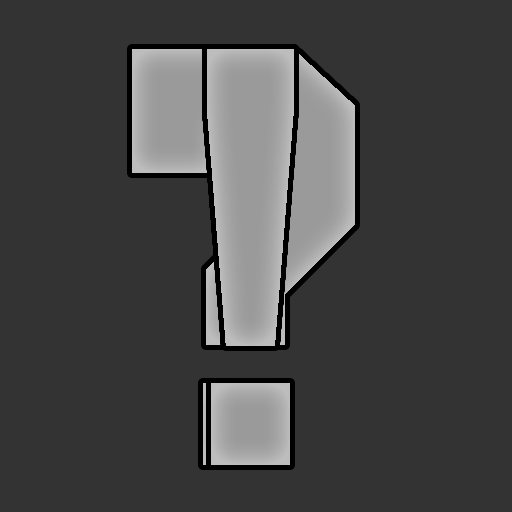
<style>
.page{position:relative;width:512px;height:512px;background:#333333}
.page>*{position:absolute;margin:0}
.t1{font:587.6px "AldotheApache";letter-spacing:0.1em;color:#a1a1a1}
.t2{font:587.6px "AldotheApache";letter-spacing:0.1em;color:#a3a3a3}
</style>
<div class="page">
<p class="t1" style="left:132px;top:49px;width:223px;height:416px">?</p>
<p class="t1" style="left:132px;top:49px;width:223px;height:416px">?</p>
<p class="t2" style="left:207px;top:49px;width:87px;height:416px">!</p>
<p class="t2" style="left:207px;top:49px;width:87px;height:416px">!</p>
</div>
